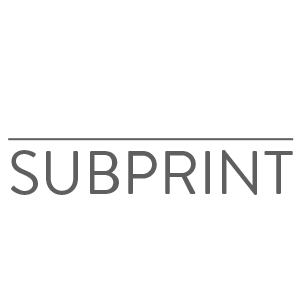
<style>
.page{position:relative;width:300px;height:300px;background:#ffffff}
.page>*{position:absolute;margin:0}
.t1{font:61.1px "BrandonGrotesque-Regular";color:#5f5f5f}
</style>
<div class="page">
<p class="t1" style="left:11px;top:150px;width:108px;height:45px">SUB</p>
<p class="t1" style="left:128px;top:150px;width:165px;height:45px">PRINT</p>
</div>
